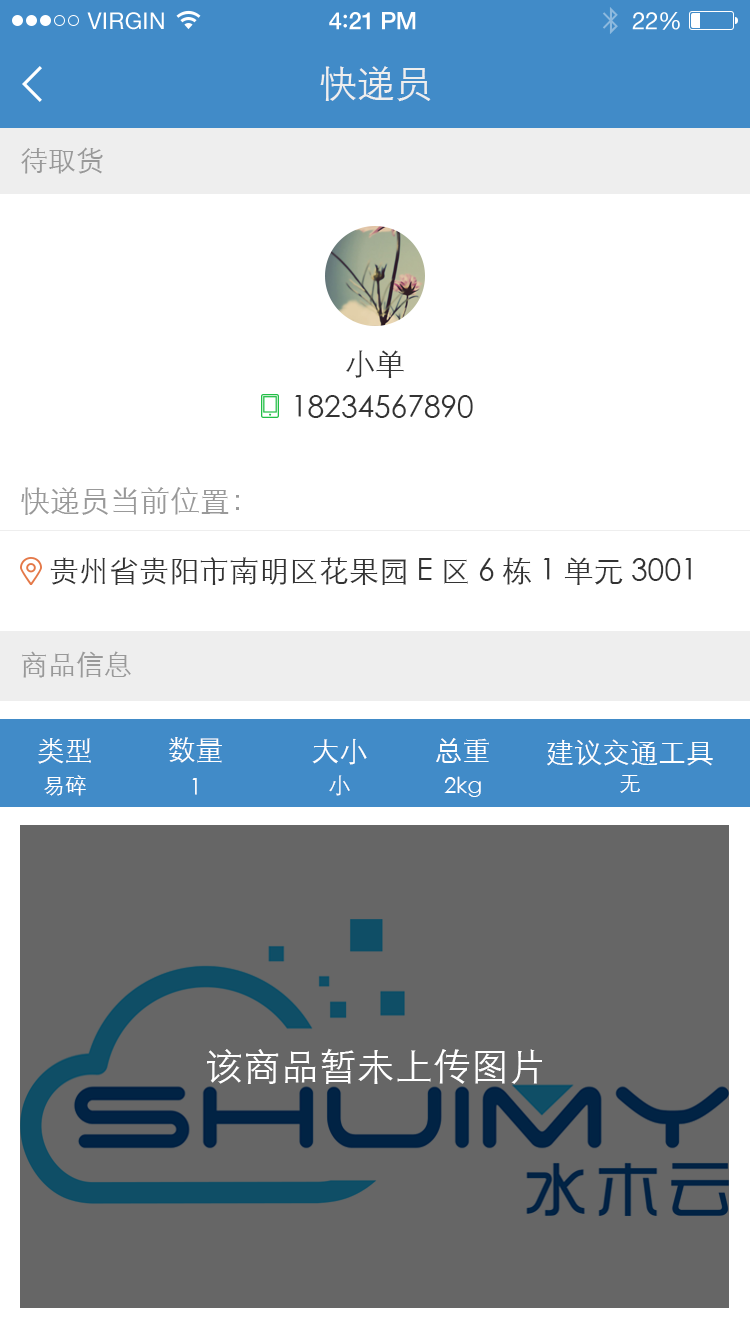
<style>
.page{position:relative;width:750px;height:1334px;background:#ffffff}
.page>*{position:absolute;margin:0}
.t1{font:23px "HelveticaNeue";letter-spacing:0.02em;color:#ffffff}
.t2{font:24px "HelveticaNeue-Medium";letter-spacing:-0.02em;color:#ffffff}
.t3{font:26px "Avenir-Medium";letter-spacing:-0.02em;color:#ffffff}
.t4{font:24px "HelveticaNeue";letter-spacing:-0.02em;color:#ffffff}
.t5{font:38px "STXihei";color:#eeeeee}
.t6{font:28px "STXihei";color:#999999}
.t7{font:30px "STXihei";color:#333333}
.t8{font:30px "STXihei";color:#999999}
.t9{font:28px "STXihei";color:#ffffff}
.t10{font:22px "STXihei";color:#ffffff}
.t11{font:38px "STXihei";color:#ffffff}
</style>
<div class="page">
<p class="t1" style="left:87px;top:12px;width:77px;height:18px">VIRGIN</p>
<p class="t2" style="left:329px;top:12px;width:87px;height:18px">4<span class="t3">:</span>21 PM</p>
<p class="t4" style="left:632px;top:12px;width:48px;height:18px">22%</p>
<p class="t5" style="left:320px;top:66px;width:111px;height:36px">快递员</p>
<p class="t6" style="left:21px;top:147px;width:82px;height:27px">待取货</p>
<p class="t7" style="left:346px;top:350px;width:58px;height:28px">小单</p>
<p class="t7" style="left:295px;top:394px;width:178px;height:24px">18234567890</p>
<p class="t8" style="left:21px;top:487px;width:218px;height:28px">快递员当前位置：</p>
<p class="t7" style="left:50px;top:557px;width:641px;height:28px">贵州省贵阳市南明区花果园E区6栋1单元3001</p>
<p class="t6" style="left:22px;top:651px;width:109px;height:27px">商品信息</p>
<p class="t9" style="left:169px;top:737px;width:53px;height:26px">数量</p>
<p class="t9" style="left:38px;top:738px;width:53px;height:26px">类型</p>
<p class="t9" style="left:312px;top:738px;width:55px;height:27px">大小</p>
<p class="t9" style="left:436px;top:738px;width:53px;height:25px">总重</p>
<p class="t9" style="left:547px;top:739px;width:166px;height:27px">建议交通工具</p>
<p class="t10" style="left:44px;top:775px;width:42px;height:21px">易碎</p>
<p class="t10" style="left:192px;top:778px;width:5px;height:17px">1</p>
<p class="t10" style="left:329px;top:775px;width:21px;height:21px">小</p>
<p class="t10" style="left:444px;top:776px;width:37px;height:21px">2kg</p>
<p class="t10" style="left:620px;top:775px;width:20px;height:18px">无</p>
<p class="t11" style="left:207px;top:1048px;width:335px;height:36px">该商品暂未上传图片</p>
</div>
